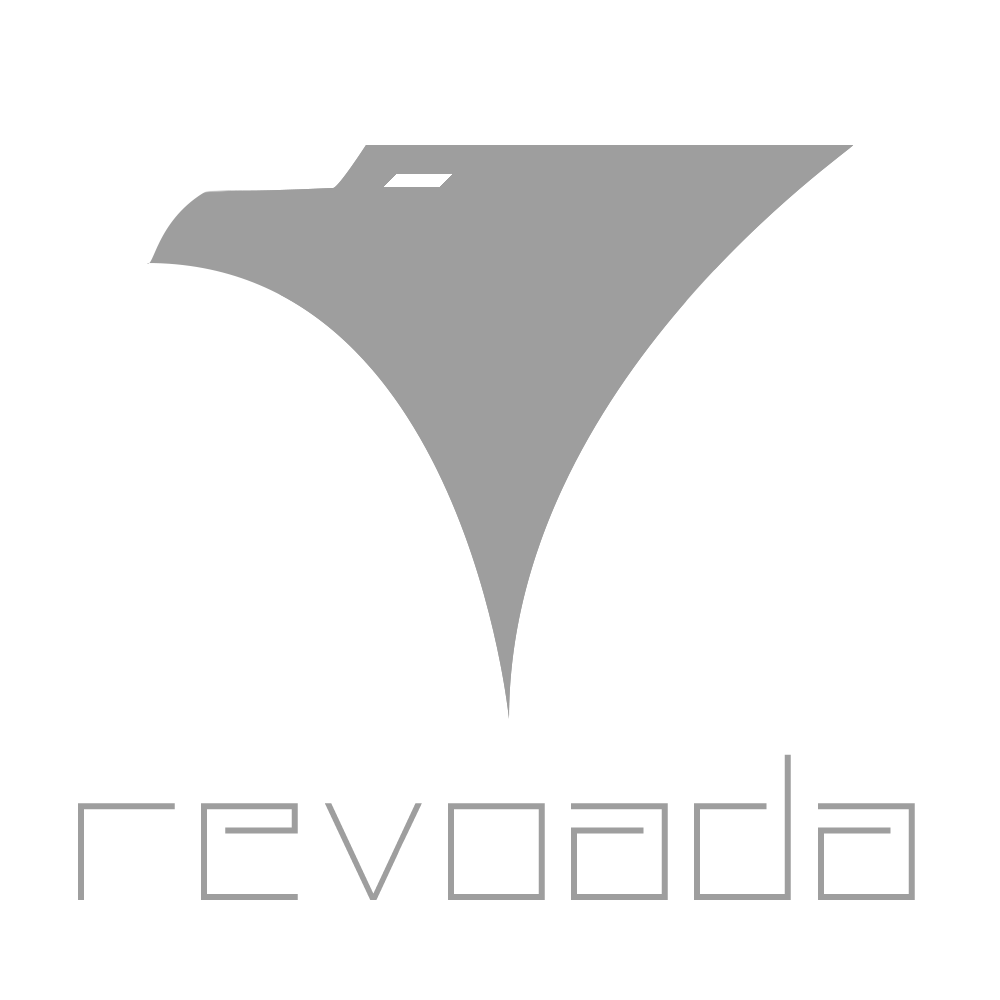
<style>
.page{position:relative;width:1000px;height:1000px;background:#ffffff}
.page>*{position:absolute;margin:0}
.t1{font:242px "SquaredDisplay";letter-spacing:0.01em;color:#9e9e9e}
</style>
<div class="page">
<p class="t1" style="left:78px;top:754px;width:837px;height:146px">revoada</p>
</div>
